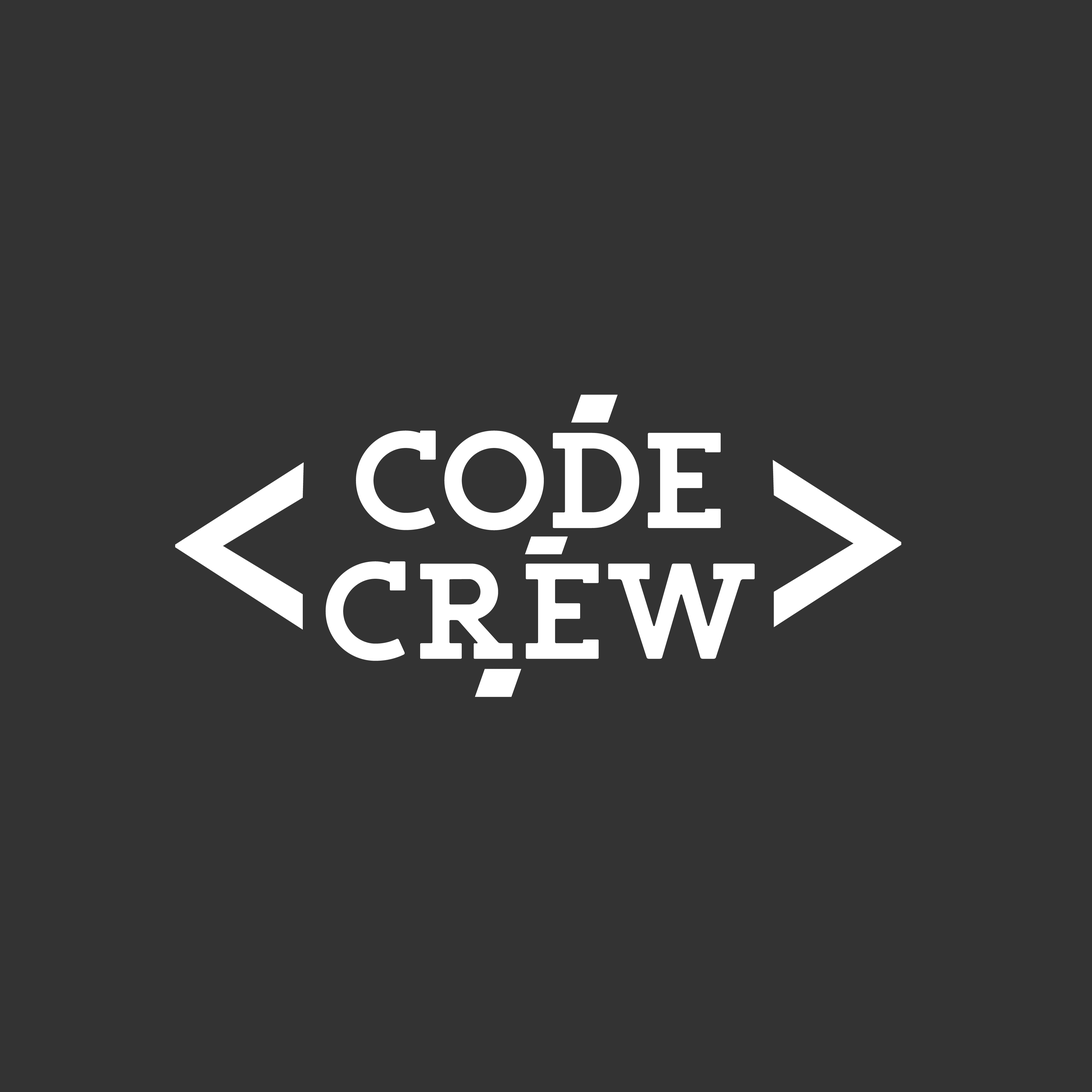
<style>
.page{position:relative;width:1092px;height:1092px;background:#333333}
.page>*{position:absolute;margin:0}
.t1{font:147.9px/130.8px "SalveationSlab";letter-spacing:0.01em;color:#ffffff}
.t2{font:147.9px/130.8px "SalveationSlab";color:#ffffff}
.t3{font:272.9px "LEMONMILK-Regular";color:#ffffff}
</style>
<div class="page">
<p class="t1" style="left:325px;top:431px;width:430px;height:230px;text-align:center">Code<br><span class="t2">crew</span></p>
<p class="t3" style="left:773px;top:460px;width:128px;height:167px">&gt;</p>
<p class="t3" style="left:175px;top:462px;width:129px;height:168px">&lt;</p>
</div>
